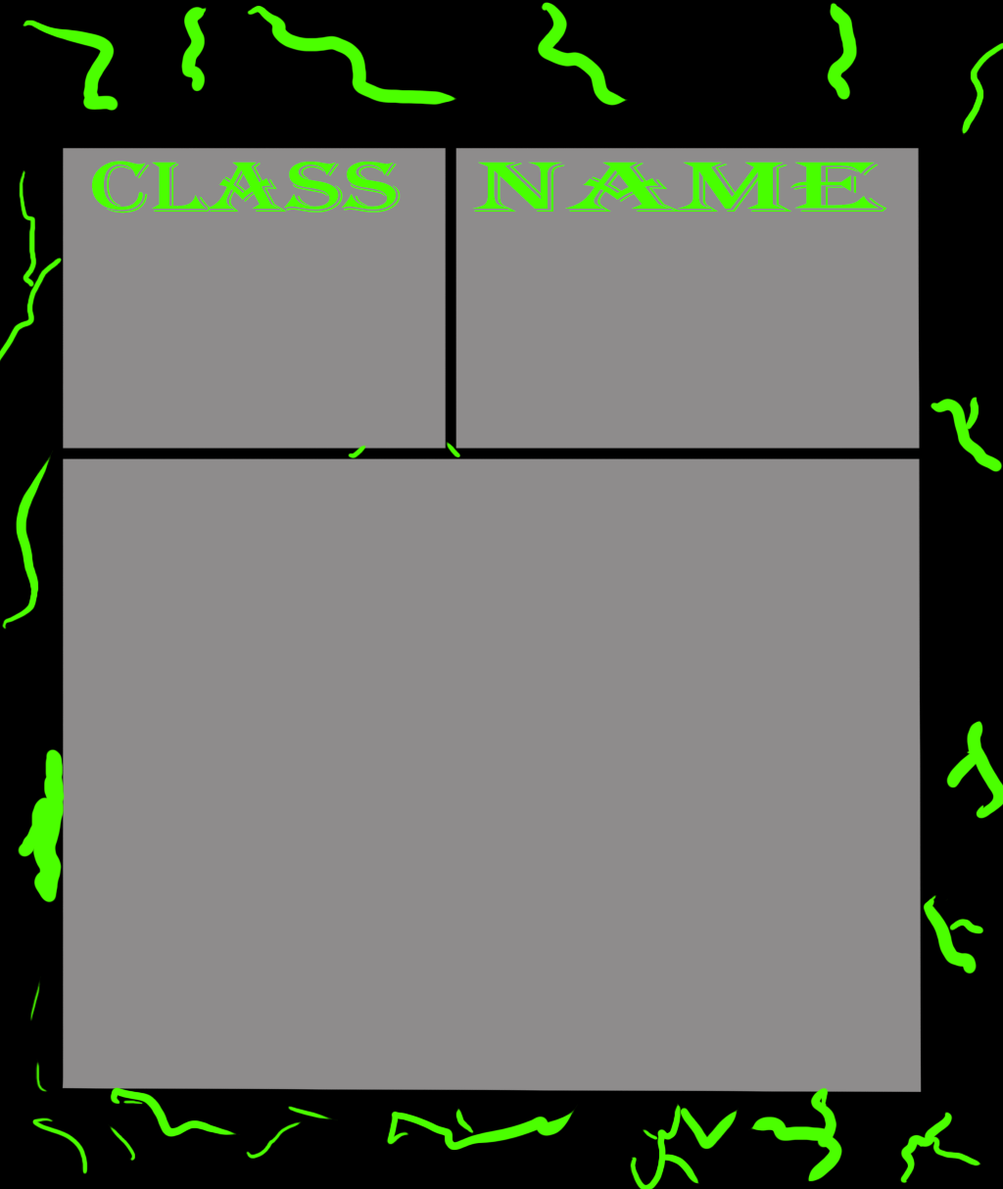
<style>
.page{position:relative;width:1003px;height:1189px;background:#8e8c8c}
.page>*{position:absolute;margin:0}
.t1{font:73.5px "Algerian";color:#4bff00;scale:1.41 1}
.t2{font:73.5px "Algerian";color:#48ff00;scale:2.06 1}
</style>
<div class="page">
<p class="t1" style="left:92px;top:161px;width:309px;height:53px">Class</p>
<p class="t2" style="left:472px;top:162px;width:415px;height:50px">Name</p>
</div>
